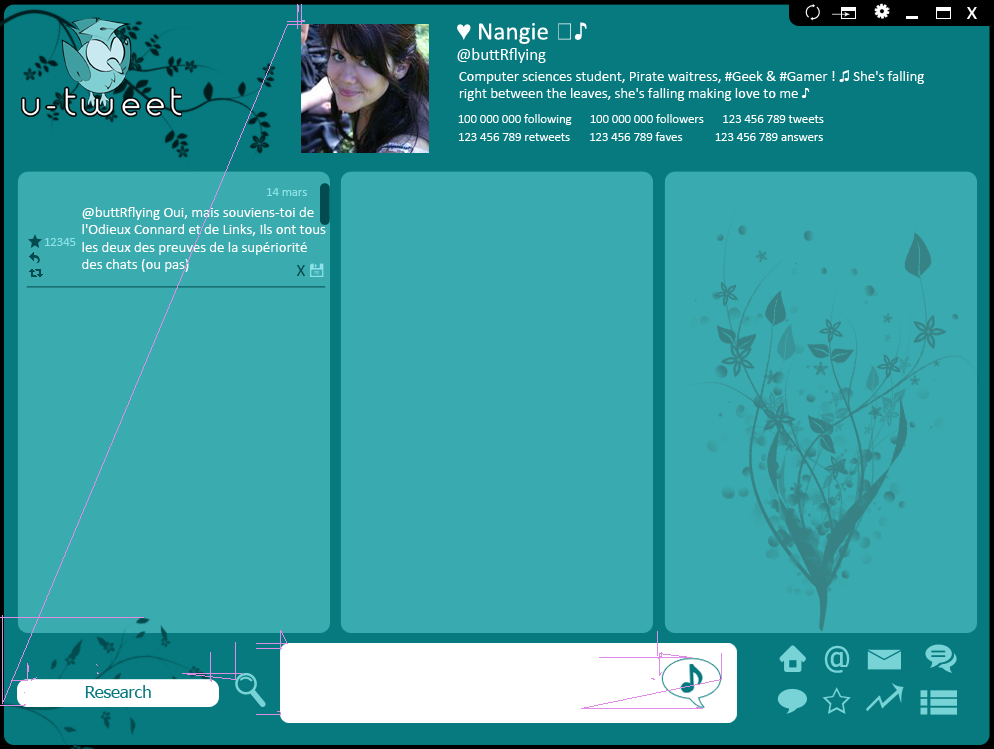
<style>
.page{position:relative;width:994px;height:749px;background:#39aaaf}
.page>*{position:absolute;margin:0}
.t1{font:25px "Calibri";letter-spacing:0.005em;color:#ffffff}
.t2{font:25px "TimesNewRomanPSMT";letter-spacing:0.005em;color:#ffffff}
.t3{font:16.7px "Calibri";letter-spacing:0.005em;color:#ffffff}
.t4{font:14.6px "Calibri";letter-spacing:0.005em;color:#ffffff}
.t5{font:14.6px "TimesNewRomanPSMT";letter-spacing:0.005em;color:#ffffff}
.t6{font:12.5px "Calibri";letter-spacing:0.005em;color:#ffffff}
.t7{font:12.5px "Calibri";letter-spacing:0.005em;color:#fefefe}
.t8{font:12.5px "Calibri";letter-spacing:0.005em;color:#8ce2e7}
.t9{font:16.7px "Calibri";letter-spacing:0.005em;color:#024b4e}
.t10{font:31.4px "Tahoma";color:#77d3d6}
.t11{font:16.7px "Tahoma";color:#067a7f}
</style>
<div class="page">
<p class="t1" style="left:457px;top:22px;width:130px;height:22px"><span class="t2">♥</span> Nangie <span class="t2">☆♪</span></p>
<p class="t3" style="left:457px;top:48px;width:89px;height:15px">@buttRflying</p>
<p class="t4" style="left:459px;top:70px;width:465px;height:31px">Computer sciences student, Pirate waitress, #Geek &amp; #Gamer ! <span class="t5">♫</span> She's falling right between the leaves, she's falling making love to me <span class="t5">♪</span></p>
<p class="t6" style="left:458px;top:114px;width:114px;height:11px">100 000 000 following</p>
<p class="t6" style="left:590px;top:114px;width:114px;height:9px">100 000 000 followers</p>
<p class="t6" style="left:723px;top:115px;width:101px;height:8px">123 456 789 tweets</p>
<p class="t7" style="left:459px;top:133px;width:111px;height:8px">123 456 789 retweets</p>
<p class="t6" style="left:590px;top:132px;width:93px;height:9px">123 456 789 faves</p>
<p class="t6" style="left:715px;top:133px;width:108px;height:8px">123 456 789 answers</p>
<p class="t8" style="left:267px;top:188px;width:40px;height:8px">14 mars</p>
<p class="t4" style="left:82px;top:207px;width:244px;height:65px">@buttRflying Oui, mais souviens-toi de l'Odieux Connard et de Links, Ils ont tous les deux des preuves de la supériorité des chats (ou pas)</p>
<p class="t8" style="left:45px;top:238px;width:31px;height:8px">12345</p>
<p class="t9" style="left:296px;top:265px;width:9px;height:11px">X</p>
<p class="t10" style="left:824px;top:645px;width:26px;height:28px">@</p>
<p class="t11" style="left:85px;top:685px;width:66px;height:13px">Research</p>
</div>
